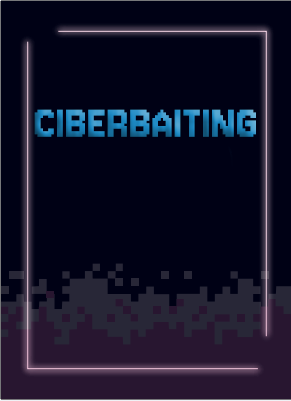
<style>
.page{position:relative;width:291px;height:401px;background:#000115}
.page>*{position:absolute;margin:0}
.t1{font:50px "Jersey10-Regular";letter-spacing:0.025em}
</style>
<div class="page">
<p class="t1" style="left:34px;top:109px;width:222px;height:28px">CIBERBAITING</p>
</div>
